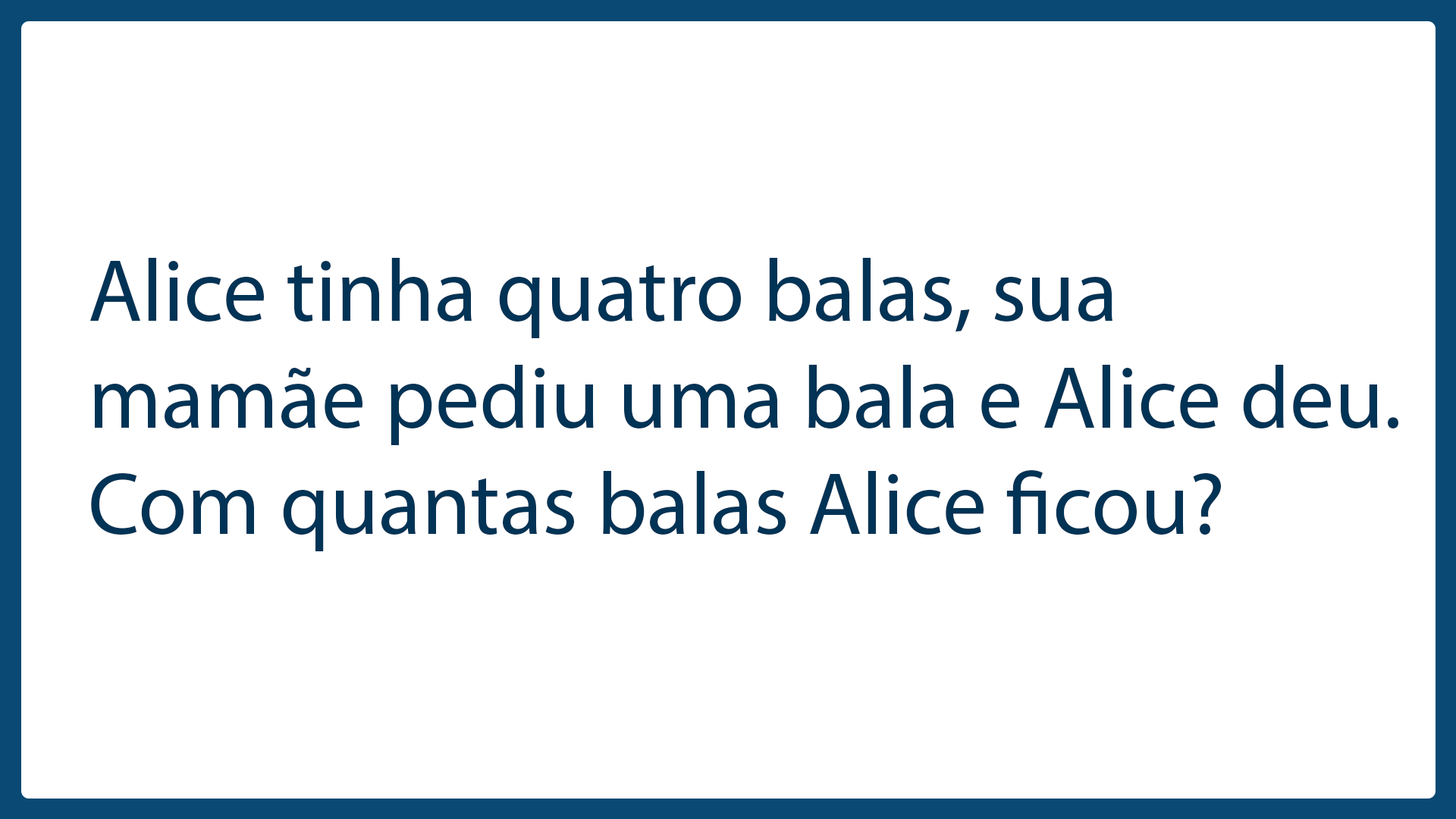
<style>
.page{position:relative;width:1456px;height:819px;background:#ffffff}
.page>*{position:absolute;margin:0}
.t1{font:88.8px "MyriadPro-Regular";color:#003355}
</style>
<div class="page">
<p class="t1" style="left:90px;top:258px;width:1308px;height:293px">Alice tinha quatro balas, sua mamãe pediu uma bala e Alice deu. Com quantas balas Alice ficou?</p>
</div>
